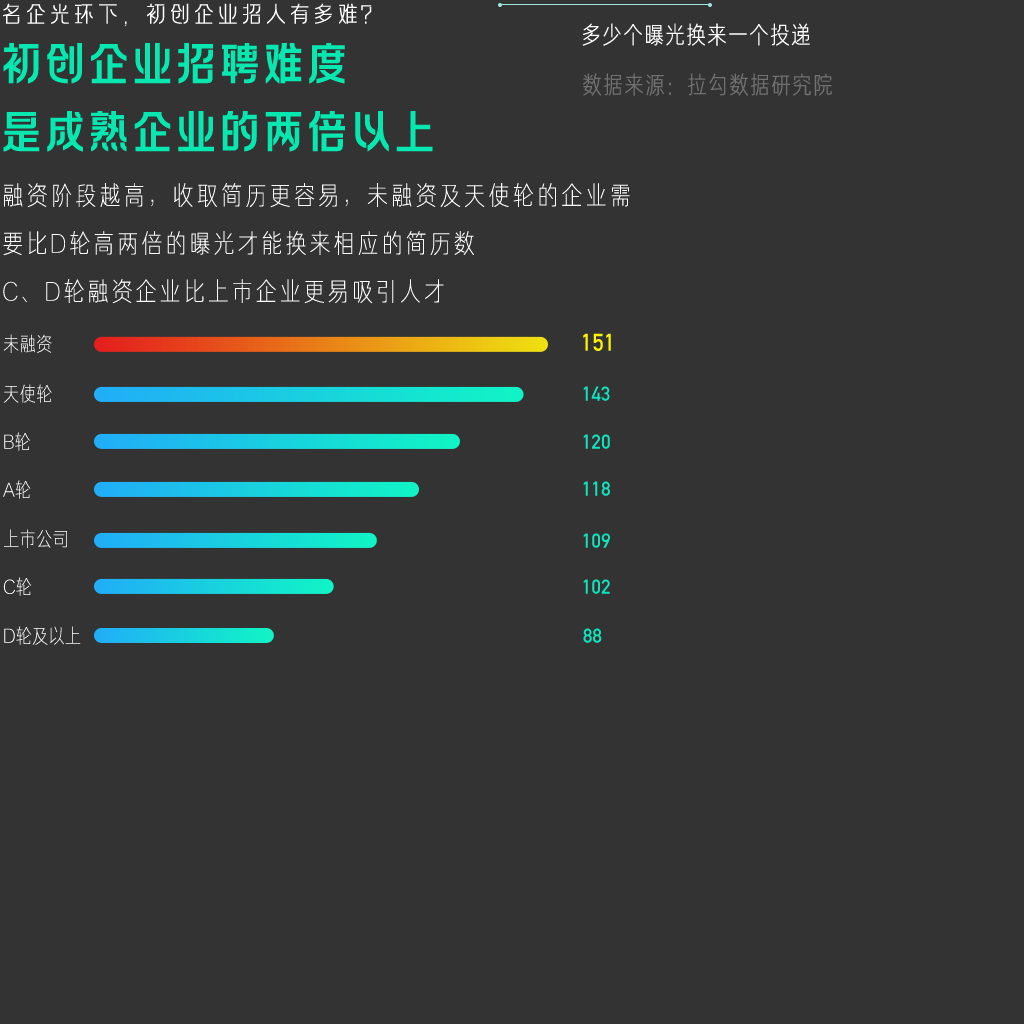
<style>
.page{position:relative;width:1024px;height:1024px;background:#333333}
.page>*{position:absolute;margin:0}
.t1{font:24px "FZLAGBTTS_XI--GB1-0";color:#ffffff;text-transform:uppercase}
.t2{font:24px "FZJUNH_XIJW--GB1-0";letter-spacing:0.05em;color:#ffffff;text-transform:uppercase}
.t3{font:48px/34px "FZLAGBTTS_ZHONG--GB1-0";letter-spacing:-0.09em;color:#05e9b1;text-transform:uppercase}
.t4{font:24px "FZJUNH_XIJW--GB1-0";letter-spacing:0.05em;color:#717171;text-transform:uppercase}
.t5{font:26px/48px "FZJUNH_XIANJW--GB1-0";letter-spacing:0.1em;color:#ffffff}
.t6{font:20px "FZJUNH_XIJW--GB1-0"}
.t7{font:24px "DINAlternate-Bold";color:#fff300}
.t8{font:20px "FZJUNH_XIJW--GB1-0";color:#ffffff}
.t9{font:20px "DINAlternate-Bold";color:#0ee3bd}
.t10{font:20px "DINAlternate-Bold";color:#0ee4bd}
.t11{font:20px "DINAlternate-Bold";color:#0ee5bd}
</style>
<div class="page">
<p class="t1" style="left:3px;top:3px;width:369px;height:24px">名企光环下，初创企业招人有多难？</p>
<p class="t2" style="left:582px;top:23px;width:228px;height:23px">多少个曝光换来一个投递</p>
<p class="t3" style="left:3px;top:43px;width:430px;height:109px">初创企业招聘难度<br><br>是成熟企业的两倍以上</p>
<p class="t4" style="left:583px;top:73px;width:249px;height:23px">数据来源：拉勾数据研究院</p>
<p class="t5" style="left:3px;top:183px;width:627px;height:121px;text-align:justify">融资阶段越高，收取简历更容易，未融资及天使轮的企业需要比D轮高两倍的曝光才能换来相应的简历数<br>C、D轮融资企业比上市企业更易吸引人才</p>
<p class="t6" style="left:3px;top:334px;width:49px;height:19px">未融资</p>
<p class="t7" style="left:583px;top:333px;width:28px;height:18px">151</p>
<p class="t8" style="left:3px;top:384px;width:49px;height:19px">天使轮</p>
<p class="t9" style="left:583px;top:386px;width:27px;height:15px">143</p>
<p class="t6" style="left:4px;top:432px;width:26px;height:19px">B轮</p>
<p class="t10" style="left:583px;top:434px;width:27px;height:15px">120</p>
<p class="t6" style="left:3px;top:480px;width:28px;height:19px">A轮</p>
<p class="t11" style="left:583px;top:481px;width:27px;height:15px">118</p>
<p class="t6" style="left:4px;top:529px;width:63px;height:19px">上市公司</p>
<p class="t10" style="left:583px;top:533px;width:27px;height:15px">109</p>
<p class="t8" style="left:3px;top:577px;width:29px;height:19px">C轮</p>
<p class="t9" style="left:583px;top:579px;width:27px;height:15px">102</p>
<p class="t8" style="left:4px;top:626px;width:77px;height:19px">D轮及以上</p>
<p class="t10" style="left:583px;top:628px;width:19px;height:15px">88</p>
</div>
